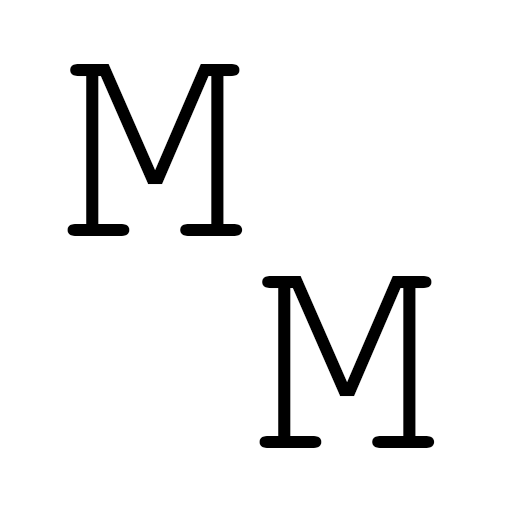
<style>
.page{position:relative;width:512px;height:512px;background:#ffffff}
.page>*{position:absolute;margin:0}
.t1{font:300px "CourierNewPSMT";color:#000000}
</style>
<div class="page">
<p class="t1" style="left:67px;top:64px;width:176px;height:172px">M</p>
<p class="t1" style="left:259px;top:276px;width:176px;height:172px">M</p>
</div>
